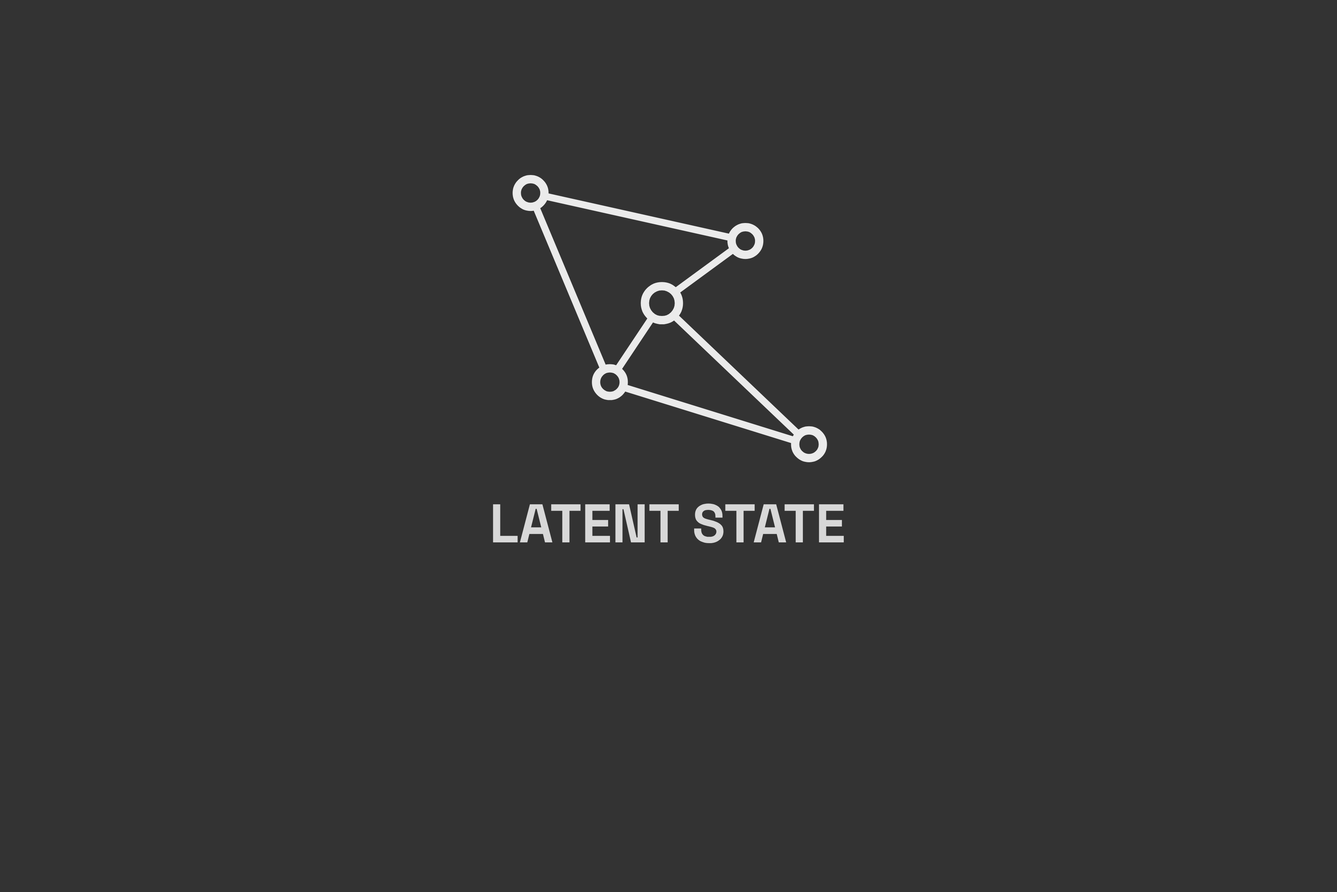
<style>
.page{position:relative;width:1337px;height:892px;background:#333333}
.page>*{position:absolute;margin:0}
.t1{font:54.3px "SpaceGroteskLight-Bold";color:#ebebeb}
</style>
<div class="page">
<p class="t1" style="left:493px;top:503px;width:351px;height:40px">LATENT STATE</p>
</div>
